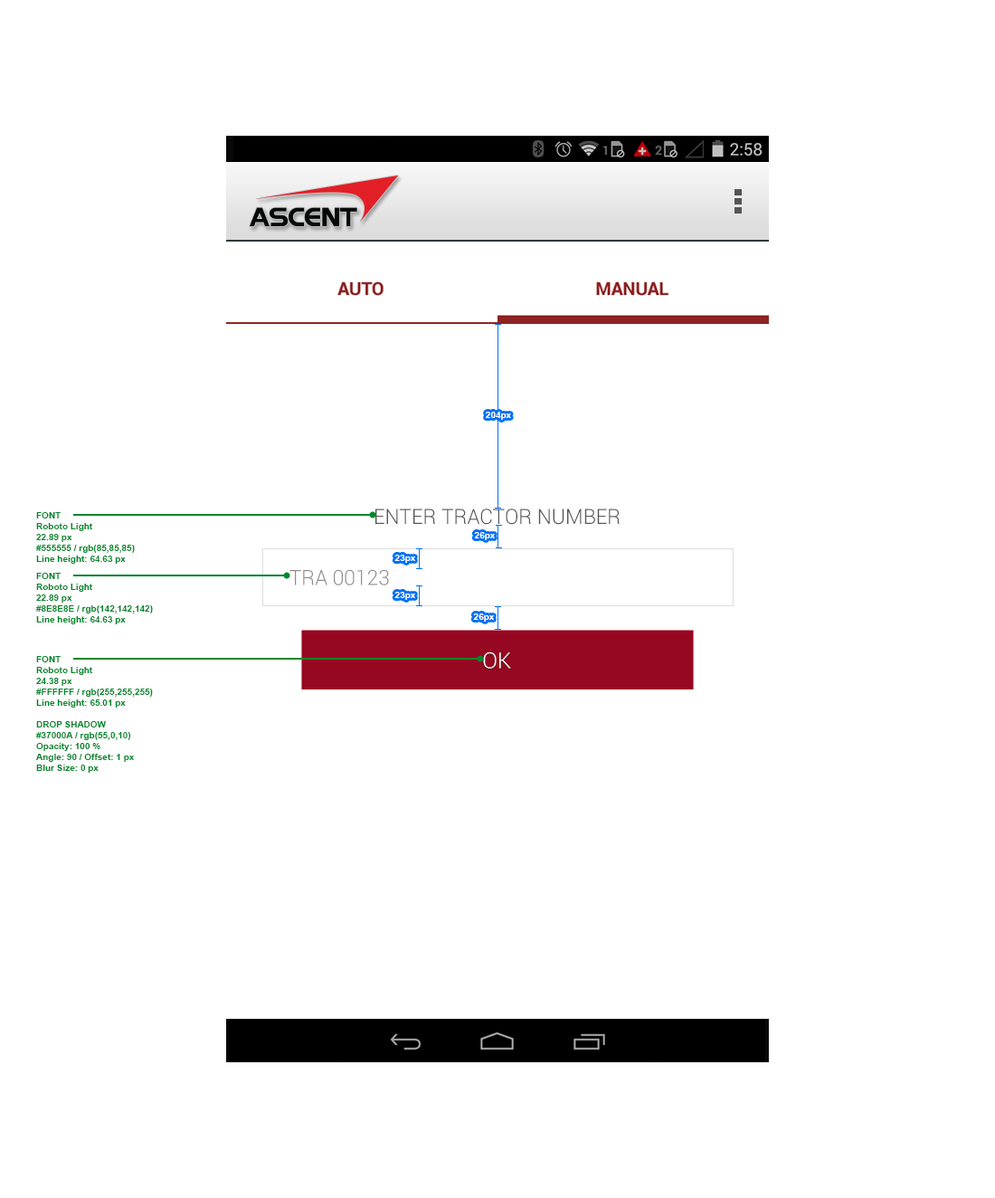
<style>
.page{position:relative;width:995px;height:1198px;background:#ffffff}
.page>*{position:absolute;margin:0}
.t1{font:9px "Arial-BoldMT";color:#ffffff}
.t2{font:20.7px "Roboto-Light";color:#555555}
.t3{font:9px "Arial-BoldMT";color:#00872b}
.t4{font:20.7px "Roboto-Light";color:#8e8e8e}
.t5{font:22.1px "Roboto-Light";color:#ffffff}
</style>
<div class="page">
<p class="t1" style="left:486px;top:412px;width:25px;height:8px">204px</p>
<p class="t2" style="left:376px;top:509px;width:244px;height:16px">ENTER TRACTOR NUMBER</p>
<p class="t3" style="left:36px;top:512px;width:99px;height:52px">FONT <br>Roboto Light<br>22.89 px<br>#555555 / rgb(85,85,85)<br>Line height: 64.63 px</p>
<p class="t1" style="left:474px;top:532px;width:21px;height:8px">26px</p>
<p class="t1" style="left:395px;top:555px;width:20px;height:8px">23px</p>
<p class="t4" style="left:290px;top:569px;width:99px;height:16px">TRA 00123</p>
<p class="t3" style="left:36px;top:573px;width:117px;height:51px">FONT <br>Roboto Light<br>22.89 px<br>#8E8E8E / rgb(142,142,142)<br>Line height: 64.63 px</p>
<p class="t1" style="left:395px;top:592px;width:20px;height:8px">23px</p>
<p class="t1" style="left:473px;top:613px;width:21px;height:9px">26px</p>
<p class="t5" style="left:483px;top:652px;width:28px;height:17px">OK</p>
<p class="t3" style="left:36px;top:656px;width:117px;height:117px">FONT <br>Roboto Light<br>24.38 px<br>#FFFFFF / rgb(255,255,255)<br>Line height: 65.01 px<br><br>DROP SHADOW<br>#37000A / rgb(55,0,10)<br>Opacity: 100 %<br>Angle: 90 / Offset: 1 px<br>Blur Size: 0 px</p>
</div>
